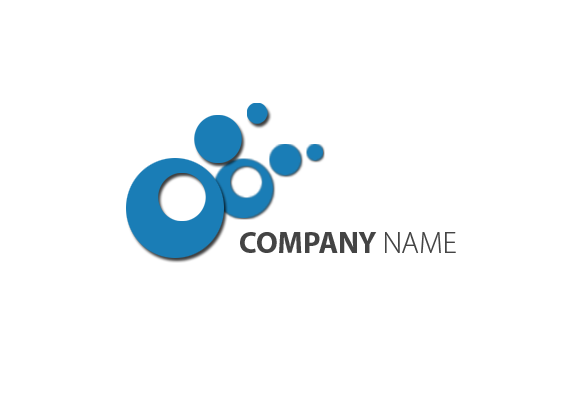
<style>
.page{position:relative;width:585px;height:397px;background:#ffffff}
.page>*{position:absolute;margin:0}
.t1{font:30px "MyriadPro-Bold";color:#444444}
.t2{font:30px "MyriadPro-Light";color:#444444}
</style>
<div class="page">
<p class="t1" style="left:240px;top:232px;width:216px;height:21px">COMPANY <span class="t2">NAME</span></p>
</div>
